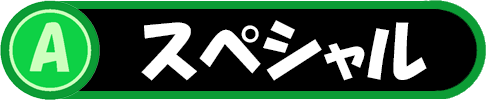
<style>
.page{position:relative;width:486px;height:100px;background:#000000}
.page>*{position:absolute;margin:0}
.t1{font:66.7px "HGPSoeiKakupoptai";color:#ffffff}
</style>
<div class="page">
<p class="t1" style="left:141px;top:20px;width:286px;height:61px">スペシャル</p>
</div>
